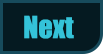
<style>
.page{position:relative;width:103px;height:54px;background:#051a21}
.page>*{position:absolute;margin:0}
.t1{font:28.2px "Impact";color:#34c3d9}
</style>
<div class="page">
<p class="t1" style="left:24px;top:15px;width:50px;height:24px">Next</p>
</div>
